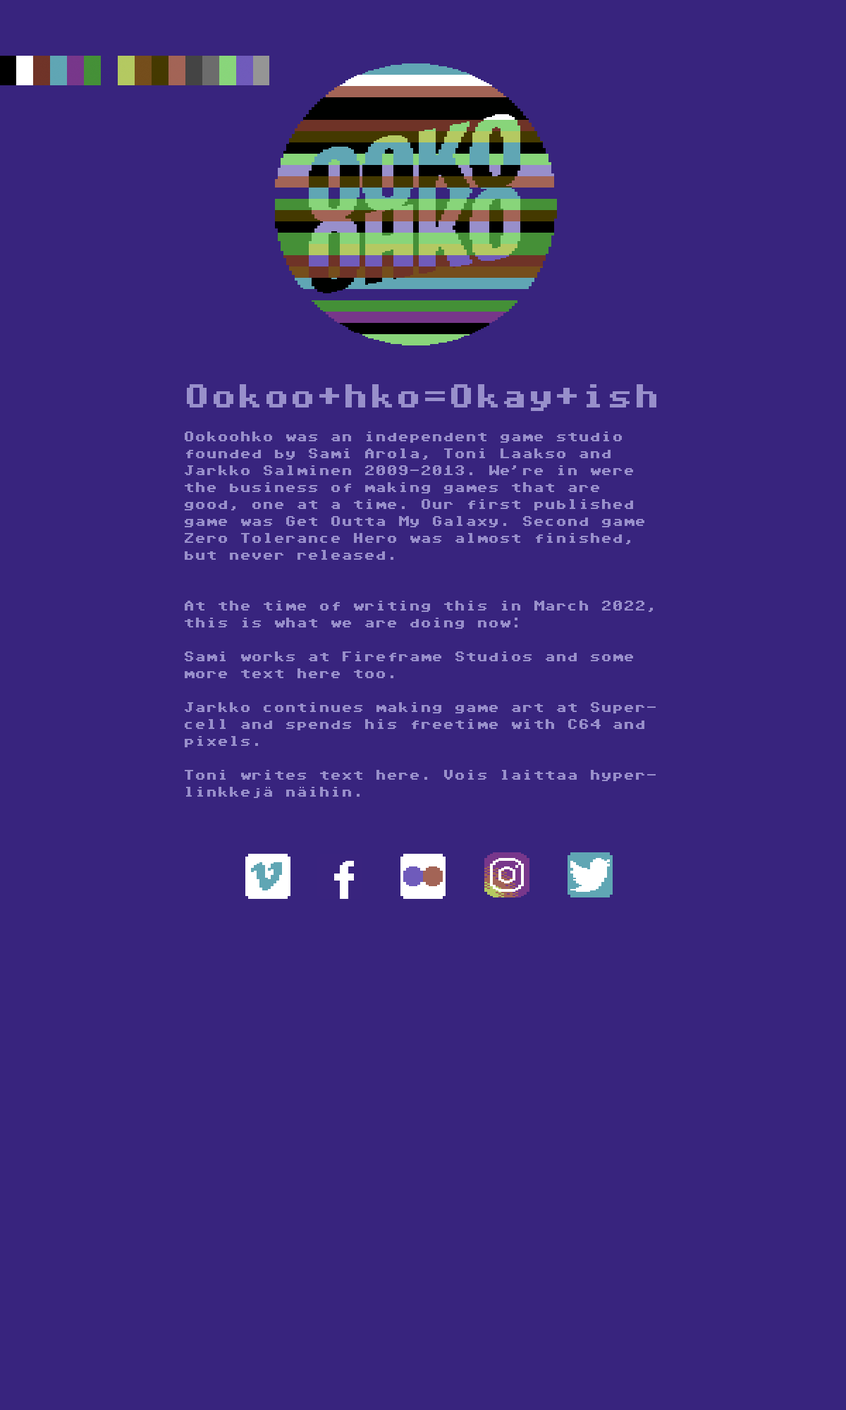
<style>
.page{position:relative;width:846px;height:1410px;background:#38247e}
.page>*{position:absolute;margin:0}
.t1{font:14.1px "Commodore-64-Pixeled";color:#988fcb}
.t2{font:33.8px "Commodore-64-Pixeled";color:#988fcb}
</style>
<div class="page">
<p class="t1" style="left:185px;top:384px;width:471px;height:414px"><span class="t2">Ookoo+hko=Okay+ish<br></span><br>Ookoohko was an independent game studio founded by Sami Arola, Toni Laakso and Jarkko Salminen 2009-2013. We’re in were the business of making games that are good, one at a time. Our first published game was Get Outta My Galaxy. Second game Zero Tolerance Hero was almost finished, but never released.<br><br><br>At the time of writing this in March 2022, this is what we are doing now:<br><br>Sami works at Fireframe Studios and some more text here too.<br><br>Jarkko continues making game art at Supercell and spends his freetime with C64 and pixels.<br><br>Toni writes text here. Vois laittaa hyperlinkkejä näihin.</p>
</div>
